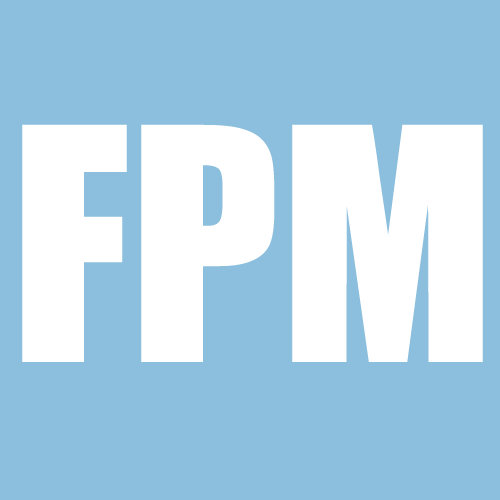
<style>
.page{position:relative;width:500px;height:500px;background:#8cbfde}
.page>*{position:absolute;margin:0}
.t1{font:300px "Impact";color:#ffffff}
</style>
<div class="page">
<p class="t1" style="left:22px;top:124px;width:461px;height:238px">FPM</p>
</div>
